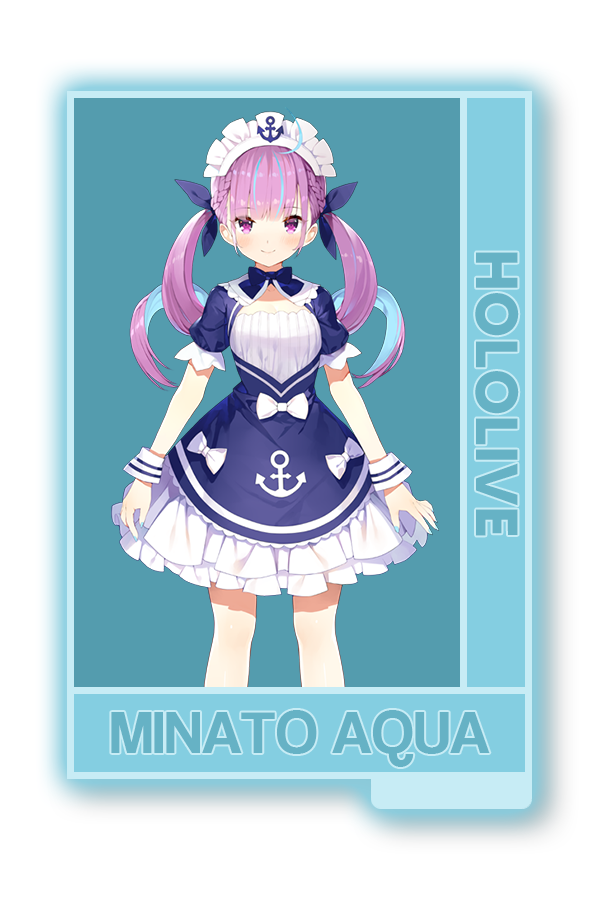
<style>
.page{position:relative;width:600px;height:900px;background:#ffffff}
.page>*{position:absolute;margin:0}
.t1{font:59.2px "MADETOMMY-Bold";color:#66b2c5}
.t2{font:61.9px "CoolveticaRg-Regular";color:#66b2c5}
</style>
<div class="page">
<p class="t1" style="left:475px;top:252px;width:44px;height:284px;rotate:90deg">HOLOLIVE</p>
<p class="t2" style="left:111px;top:710px;width:379px;height:57px">MINATO AQUA</p>
</div>
